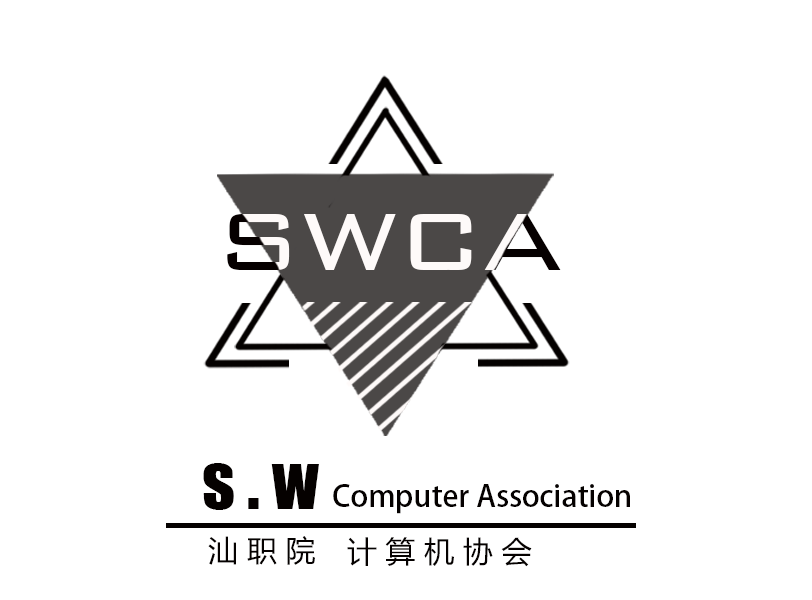
<style>
.page{position:relative;width:812px;height:600px;background:#ffffff}
.page>*{position:absolute;margin:0}
.t1{font:69.7px "Impact";color:#050100}
.t2{font:29.9px "AdobeHeitiStd-Regular";color:#050100}
.t3{font:29.9px "MicrosoftYaHeiUI";color:#050100}
</style>
<div class="page">
<p class="t1" style="left:203px;top:463px;width:116px;height:47px">s . w</p>
<p class="t2" style="left:333px;top:484px;width:297px;height:30px">Computer Association</p>
<p class="t3" style="left:208px;top:536px;width:107px;height:29px">汕 职 院</p>
<p class="t3" style="left:347px;top:537px;width:185px;height:30px">计 算 机 协 会</p>
</div>
